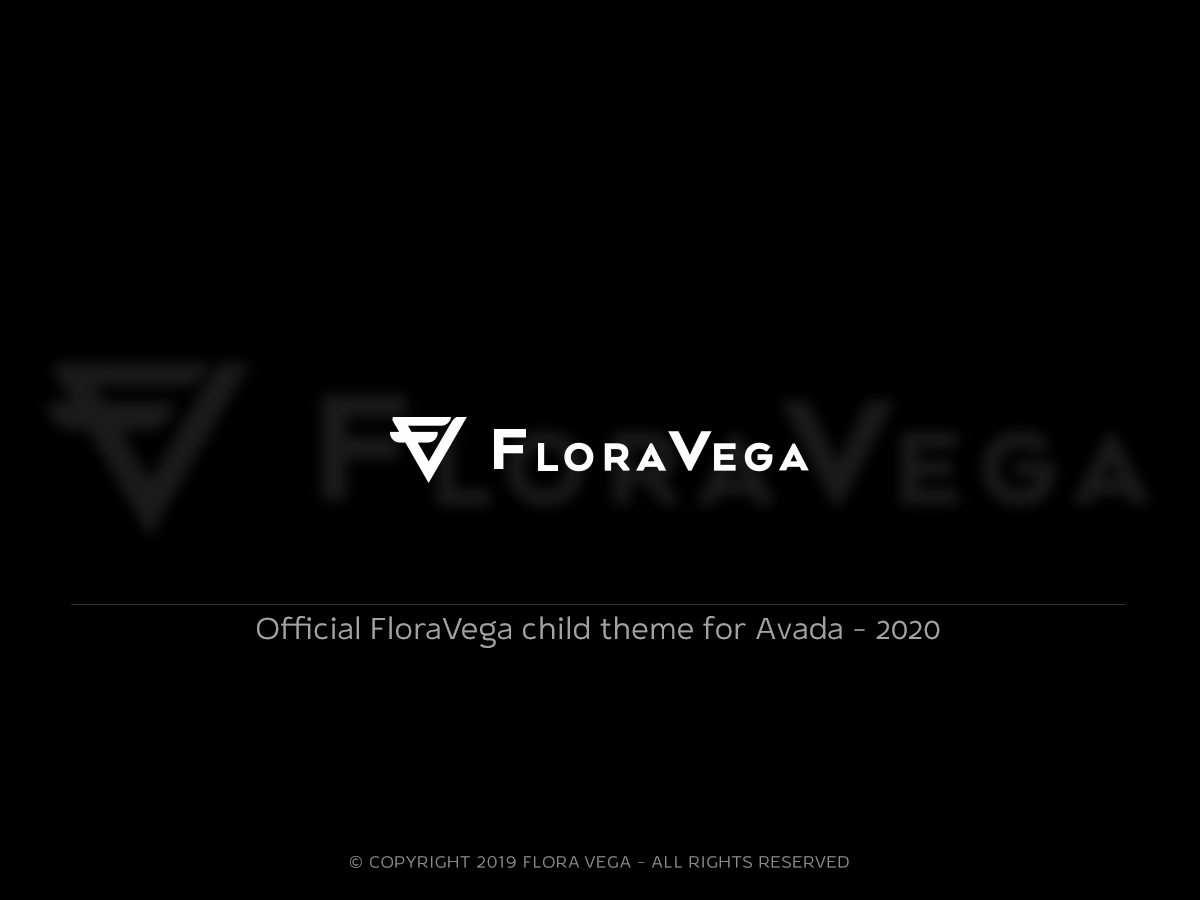
<style>
.page{position:relative;width:1200px;height:900px;background:#000000}
.page>*{position:absolute;margin:0}
.t1{font:30px "GorgaGrotesque-Light";color:#a3a3a3}
.t2{font:16px "GorgaGrotesque-Light";letter-spacing:0.05em;color:#8d8d8d;text-transform:uppercase}
</style>
<div class="page">
<p class="t1" style="left:257px;top:616px;width:683px;height:32px">Official FloraVega child theme for Avada - 2020</p>
<p class="t2" style="left:350px;top:856px;width:499px;height:12px">© Copyright 2019 Flora Vega - All Rights Reserved</p>
</div>
